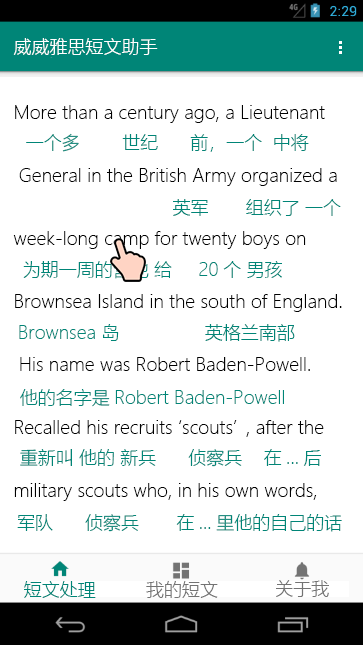
<style>
.page{position:relative;width:363px;height:645px;background:#ffffff}
.page>*{position:absolute;margin:0}
.t1{font:18px "MicrosoftYaHeiUILight";color:#ffffff}
.t2{font:18px "MicrosoftYaHeiUILight";color:#000000}
.t3{font:18px "MicrosoftYaHeiUILight";color:#008577}
.t4{font:18px "MicrosoftYaHeiUILight";color:#737373}
</style>
<div class="page">
<p class="t1" style="left:13px;top:38px;width:145px;height:17px">威威雅思短文助手</p>
<p class="t2" style="left:13px;top:105px;width:329px;height:396px">More than a century ago, a Lieutenant<br><br> General in the British Army organized a <br><br>week-long camp for twenty boys on <br><br>Brownsea Island in the south of England.<br><br> His name was Robert Baden-Powell. <br><br>Recalled his recruits ‘scouts’, after the <br><br>military scouts who, in his own words,</p>
<p class="t3" style="left:26px;top:133px;width:283px;height:19px"><span class="t2">  </span>一个多        世纪      前，一个  中将</p>
<p class="t3" style="left:173px;top:199px;width:168px;height:17px"><span class="t2">                             </span>英军       组织了 一个</p>
<p class="t3" style="left:23px;top:261px;width:259px;height:18px"><span class="t2">  </span>为期一周的营地 给     20个 男孩</p>
<p class="t3" style="left:19px;top:324px;width:276px;height:18px">Brownsea 岛                英格兰南部</p>
<p class="t3" style="left:20px;top:389px;width:264px;height:18px"><span class="t2">  </span>他的名字是Robert Baden-Powell</p>
<p class="t3" style="left:20px;top:449px;width:301px;height:18px"><span class="t2">  </span>重新叫 他的 新兵      侦察兵    在...后</p>
<p class="t3" style="left:17px;top:514px;width:325px;height:18px">军队      侦察兵       在...里他的自己的话</p>
<p class="t3" style="left:24px;top:581px;width:72px;height:17px">短文处理</p>
<p class="t4" style="left:146px;top:581px;width:72px;height:17px">我的短文</p>
<p class="t4" style="left:276px;top:580px;width:53px;height:17px">关于我</p>
</div>
